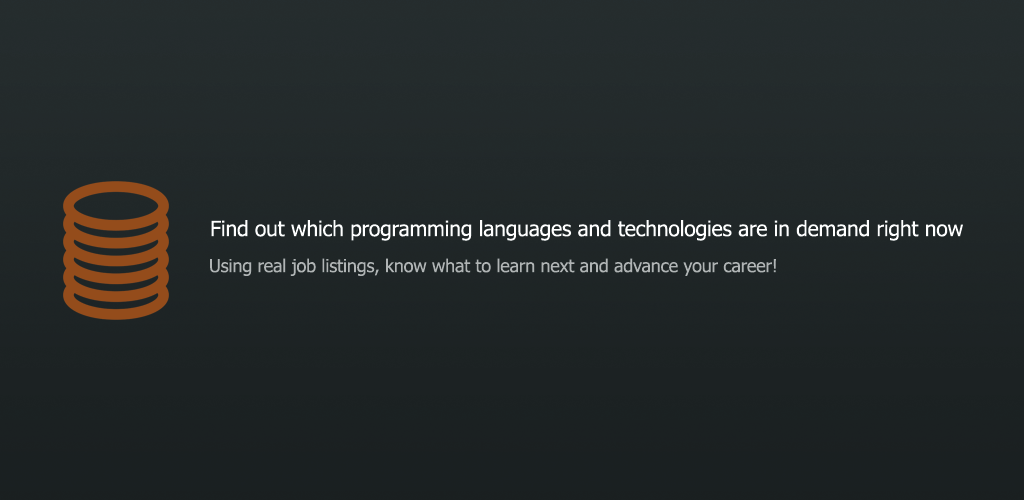
<style>
.page{position:relative;width:1024px;height:500px}
.page>*{position:absolute;margin:0}
.t1{font:21.1px "Tahoma";letter-spacing:-0.01em;color:#ffffff}
.t2{font:18px "Tahoma";letter-spacing:-0.01em;color:#b0b4b4}
</style>
<div class="page">
<p class="t1" style="left:211px;top:220px;width:752px;height:21px">Find out which programming languages and technologies are in demand right now</p>
<p class="t2" style="left:210px;top:258px;width:566px;height:18px">Using real job listings, know what to learn next and advance your career!</p>
</div>
